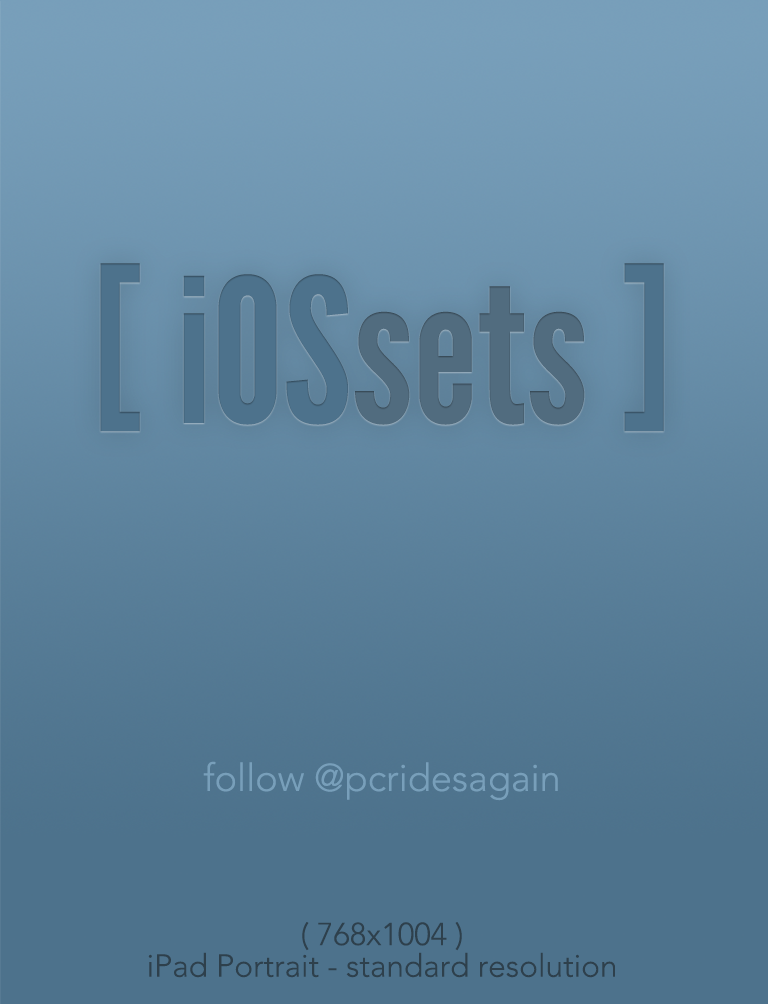
<style>
.page{position:relative;width:768px;height:1004px}
.page>*{position:absolute;margin:0}
.t1{font:200px "LeagueGothic";color:#4d728c}
.t2{font:200px "LeagueGothic";color:#516c7f}
.t3{font:37.9px "Avenir-Light";color:#789fba}
.t4{font:31.6px/31.6px "Avenir-Light";color:#2e404c}
</style>
<div class="page">
<p class="t1" style="left:100px;top:263px;width:564px;height:169px">[ iOS<span class="t2">sets </span>]</p>
<p class="t3" style="left:203px;top:761px;width:355px;height:40px">follow @pcridesagain</p>
<p class="t4" style="left:148px;top:922px;width:467px;height:56px;text-align:center">( 768x1004 )<br>iPad Portrait - standard resolution</p>
</div>
